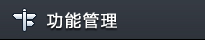
<style>
.page{position:relative;width:205px;height:40px}
.page>*{position:absolute;margin:0}
.t1{font:16px "MicrosoftYaHei";letter-spacing:0.1em;color:#ffffff;font-weight:bold}
</style>
<div class="page">
<p class="t1" style="left:47px;top:12px;width:70px;height:17px">功能管理</p>
</div>
